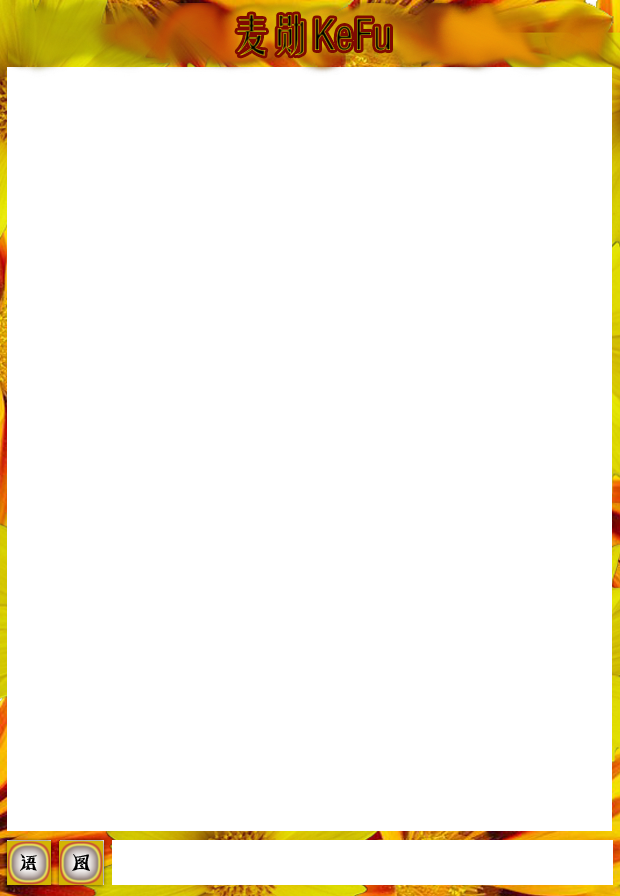
<style>
.page{position:relative;width:620px;height:896px;background:#ffffff}
.page>*{position:absolute;margin:0}
.t1{font:42.1px "FZYTK--GBK1-0"}
.t2{font:21.5px "HYk5gj";color:#000000}
</style>
<div class="page">
<p class="t1" style="left:237px;top:14px;width:153px;height:42px">麦勋KeFu</p>
<p class="t2" style="left:20px;top:854px;width:17px;height:17px">语</p>
<p class="t2" style="left:71px;top:854px;width:19px;height:18px">图</p>
</div>
